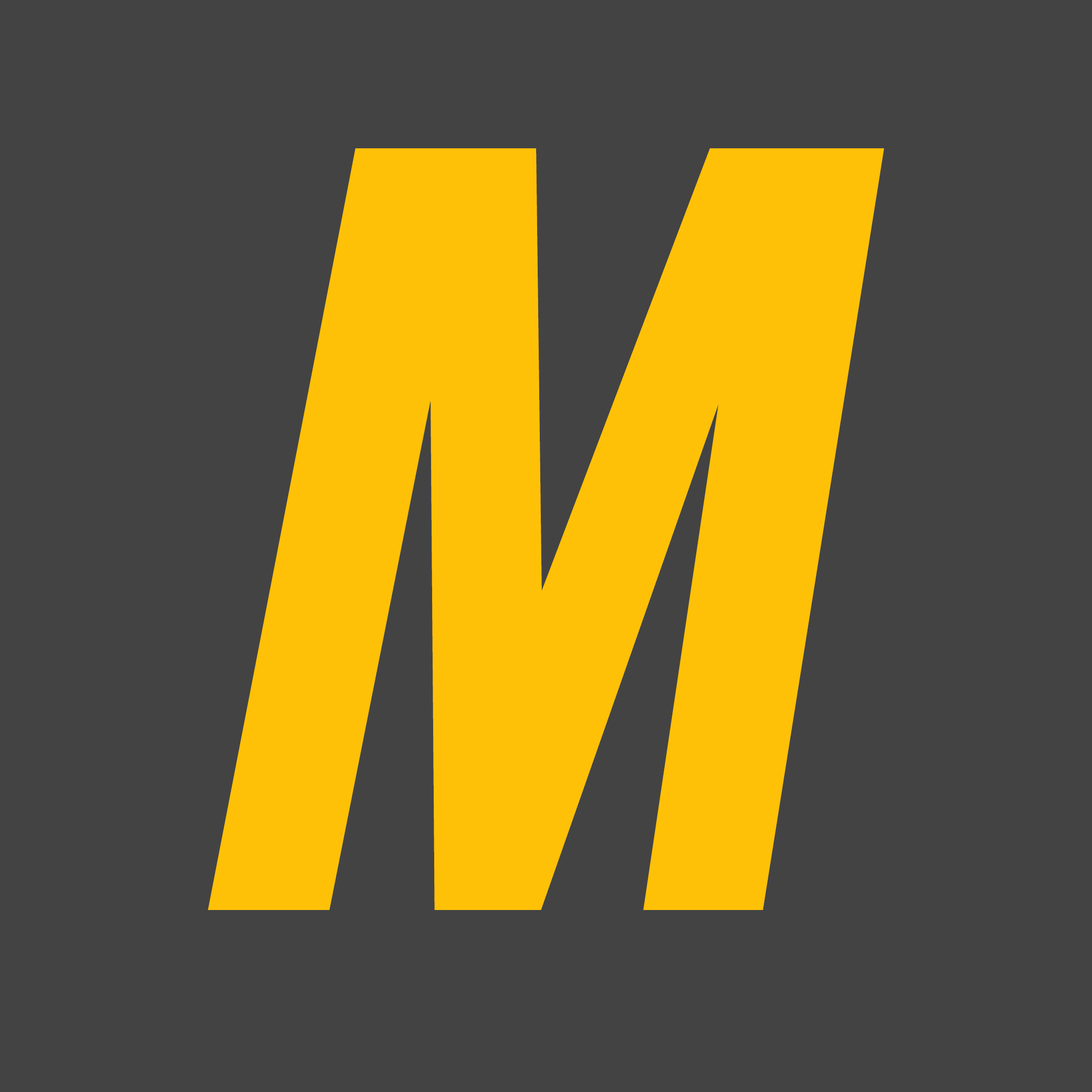
<style>
.page{position:relative;width:1092px;height:1092px;background:#434343}
.page>*{position:absolute;margin:0}
.t1{font:940.3px "Oswald-Bold";color:#ffc107;font-style:italic}
</style>
<div class="page">
<p class="t1" style="left:208px;top:148px;width:676px;height:762px">M</p>
</div>
